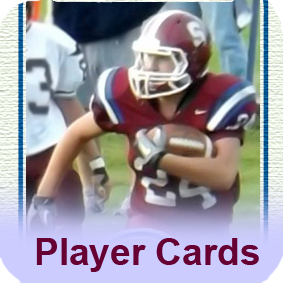
<style>
.page{position:relative;width:283px;height:283px}
.page>*{position:absolute;margin:0}
.t1{font:37px "Arial-BoldMT";color:#660033}
</style>
<div class="page">
<p class="t1" style="left:36px;top:238px;width:223px;height:34px">Player Cards</p>
</div>
